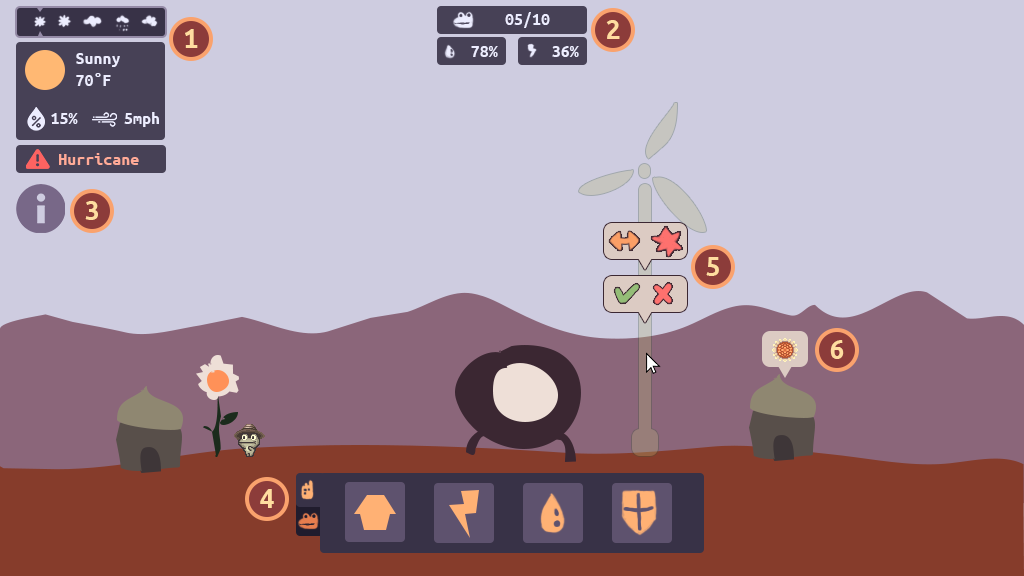
<style>
.page{position:relative;width:1024px;height:576px;background:#cecce0}
.page>*{position:absolute;margin:0}
.t1{font:18px "UbuntuMono-Bold";color:#ededff}
.t2{font:30px "UbuntuMono-Bold";color:#ffdda0}
.t3{font:18px "UbuntuMono-Bold";color:#ffaa97}
</style>
<div class="page">
<p class="t1" style="left:505px;top:12px;width:45px;height:16px">05/10</p>
<p class="t2" style="left:185px;top:29px;width:13px;height:19px">1</p>
<p class="t2" style="left:606px;top:20px;width:14px;height:19px">2</p>
<p class="t1" style="left:76px;top:53px;width:44px;height:33px">Sunny<br>70°F</p>
<p class="t1" style="left:471px;top:46px;width:27px;height:11px">78%</p>
<p class="t1" style="left:552px;top:46px;width:27px;height:11px">36%</p>
<p class="t1" style="left:51px;top:113px;width:27px;height:11px">15%</p>
<p class="t1" style="left:124px;top:112px;width:35px;height:15px">5mph</p>
<p class="t3" style="left:59px;top:153px;width:80px;height:12px">Hurricane</p>
<p class="t2" style="left:85px;top:201px;width:13px;height:19px">3</p>
<p class="t2" style="left:706px;top:257px;width:13px;height:19px">5</p>
<p class="t2" style="left:830px;top:340px;width:14px;height:19px">6</p>
<p class="t2" style="left:260px;top:489px;width:14px;height:19px">4</p>
</div>
